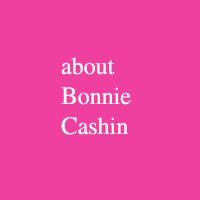
<style>
.page{position:relative;width:200px;height:200px;background:#f0409f}
.page>*{position:absolute;margin:0}
.t1{font:24px "Times-Roman";color:#ffffff}
.t2{font:25px "Times-Roman";color:#ffffff}
</style>
<div class="page">
<p class="t1" style="left:61px;top:57px;width:70px;height:78px">about <br><span class="t2">B</span>onnie<br><span class="t2">C</span>ashin</p>
</div>
